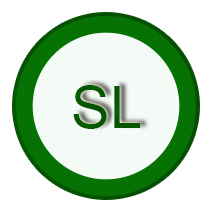
<style>
.page{position:relative;width:213px;height:213px;background:#ffffff}
.page>*{position:absolute;margin:0}
.t1{font:58.3px "ArialMT";color:#045802;font-variant:small-caps}
</style>
<div class="page">
<p class="t1" style="left:73px;top:85px;width:68px;height:44px">SL</p>
</div>
